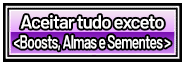
<style>
.page{position:relative;width:184px;height:64px;background:#000000}
.page>*{position:absolute;margin:0}
.t1{font:18.7px "Barlow-SemiBold";letter-spacing:-0.05em;color:#ffffff}
.t2{font:18.7px "Barlow-SemiBold";letter-spacing:-0.05em;color:#ffffff;scale:0.73 1}
</style>
<div class="page">
<p class="t1" style="left:20px;top:15px;width:144px;height:14px">Aceitar tudo exceto</p>
<p class="t2" style="left:14px;top:35px;width:157px;height:16px">&lt;Boosts, Almas e Sementes &gt;</p>
</div>
